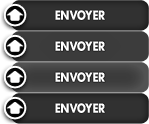
<style>
.page{position:relative;width:149px;height:124px}
.page>*{position:absolute;margin:0}
.t1{font:12px "abug'slife-debugged-Regular";letter-spacing:0.025em;color:#ffffff;text-transform:uppercase}
</style>
<div class="page">
<p class="t1" style="left:55px;top:10px;width:50px;height:10px">envoyer</p>
<p class="t1" style="left:55px;top:41px;width:50px;height:10px">envoyer</p>
<p class="t1" style="left:55px;top:72px;width:50px;height:10px">envoyer</p>
<p class="t1" style="left:55px;top:103px;width:50px;height:10px">ENVOYER</p>
</div>
